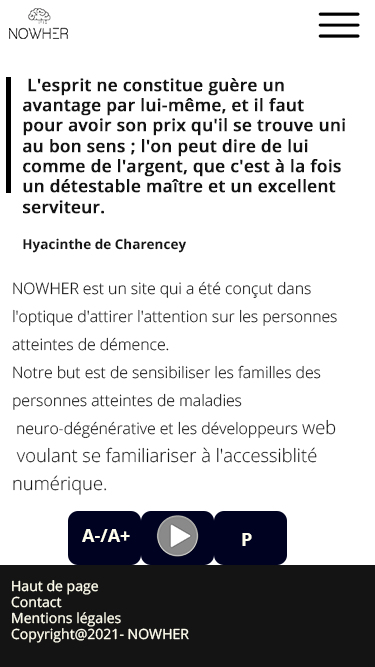
<style>
.page{position:relative;width:375px;height:667px;background:#ffffff}
.page>*{position:absolute;margin:0}
.t1{font:17px "OpenSans-SemiBold";color:#151415;font-weight:bold}
.t2{font:13.5px "OpenSans-Bold";color:#151415}
.t3{font:15.8px/14px "OpenSans-Light";color:#151415}
.t4{font:18.4px/14px "OpenSans-Light";color:#151415}
.t5{font:18px "OpenSans-Bold";color:#fffeee}
.t6{font:14px/16px "OpenSans-Regular";color:#fffeee}
.t7{font:13.9px "OpenSans-Bold";color:#fffeee}
</style>
<div class="page">
<p class="t1" style="left:23px;top:78px;width:322px;height:175px">L'esprit ne constitue guère un <br>avantage par lui-même, et il faut pour avoir son prix qu'il se trouve uni au bon sens ; l'on peut dire de lui comme de l'argent, que c'est à la fois un détestable maître et un excellent serviteur. <br><br><span class="t2">Hyacinthe de Charencey</span></p>
<p class="t3" style="left:12px;top:281px;width:325px;height:214px">NOWHER est un site qui a été conçut dans <br><br>l'optique d'attirer l'attention sur les personnes <br><br>atteintes de démence. <br><br>Notre but est de sensibiliser les familles des <br><br>personnes atteintes de maladies<br><br> neuro-dégénérative et les développeurs <span class="t4">web<br><br> voulant se familiariser à l'accessiblité<br><br>numérique.</span></p>
<p class="t5" style="left:82px;top:529px;width:48px;height:13px">A-/A+</p>
<p class="t5" style="left:242px;top:533px;width:10px;height:13px">P</p>
<p class="t6" style="left:11px;top:580px;width:178px;height:63px"><span class="t7">     <br>    </span>Haut de page<br>    Contact<br>    Mentions légales<br>    Copyright@2021- NOWHER</p>
</div>
